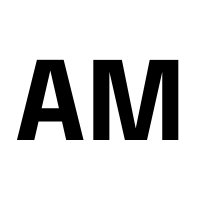
<style>
.page{position:relative;width:200px;height:200px;background:#ffffff}
.page>*{position:absolute;margin:0}
.t1{font:108.6px "Epilogue-Bold";color:#000000}
</style>
<div class="page">
<p class="t1" style="left:16px;top:59px;width:163px;height:81px">AM</p>
</div>
